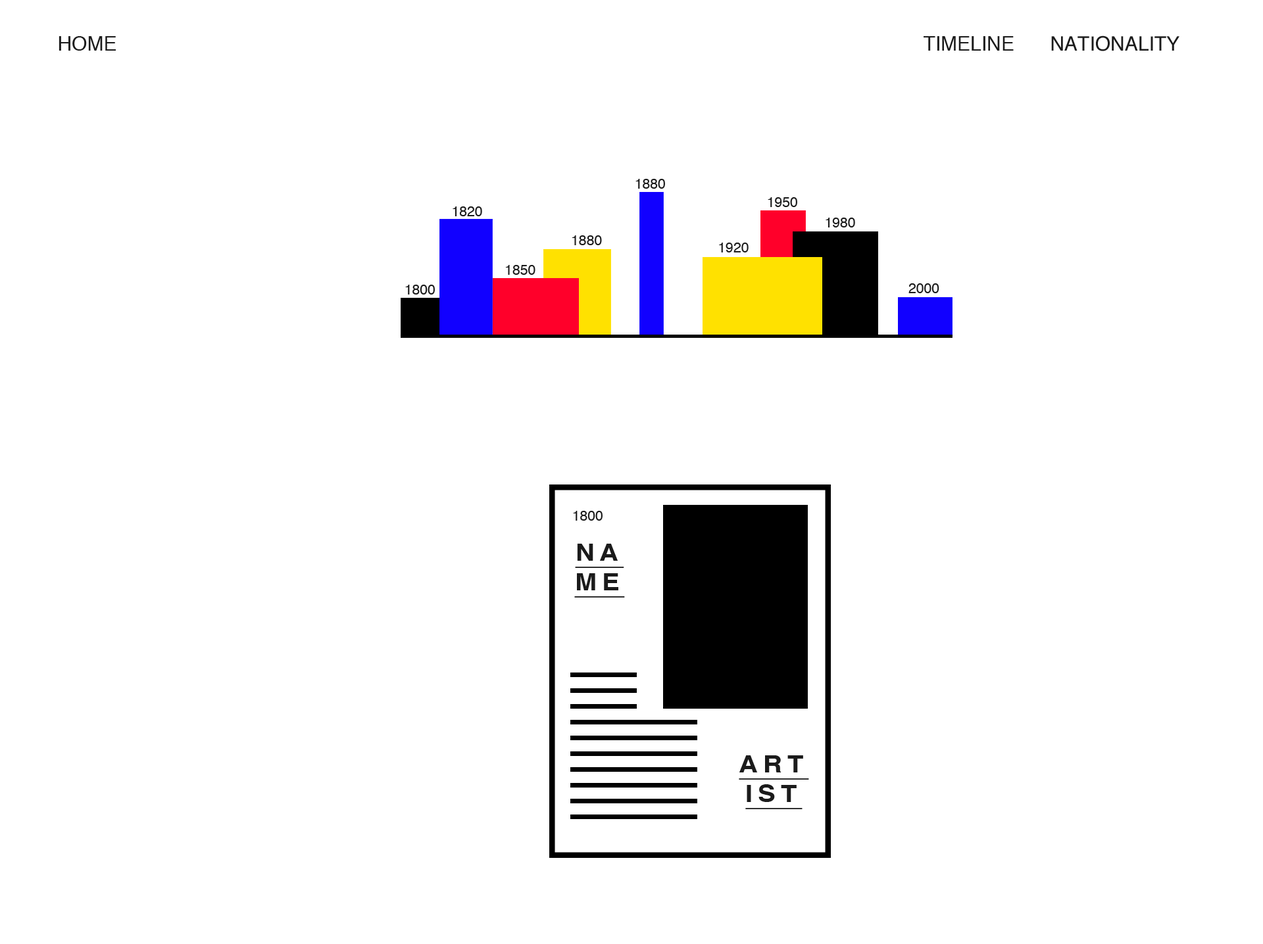
<style>
.page{position:relative;width:1263px;height:944px;background:#ffffff}
.page>*{position:absolute;margin:0}
.t1{font:19.7px "Helvetica";color:#1b1b1b}
.t2{font:13.9px "Helvetica";color:#1b1b1b}
.t3{font:23.7px/29.6px "Helvetica-Bold";letter-spacing:0.2em;color:#1b1b1b;text-decoration:underline;scale:1.11 1}
</style>
<div class="page">
<p class="t1" style="left:59px;top:36px;width:57px;height:15px">HOME</p>
<p class="t1" style="left:923px;top:36px;width:90px;height:15px">TIMELINE</p>
<p class="t1" style="left:1051px;top:36px;width:128px;height:15px">NATIONALITY</p>
<p class="t2" style="left:635px;top:179px;width:30px;height:10px">1880</p>
<p class="t2" style="left:767px;top:197px;width:30px;height:10px">1950</p>
<p class="t2" style="left:452px;top:206px;width:30px;height:10px">1820</p>
<p class="t2" style="left:825px;top:218px;width:30px;height:10px">1980</p>
<p class="t2" style="left:571px;top:235px;width:31px;height:10px">1880</p>
<p class="t2" style="left:719px;top:243px;width:29px;height:10px">1920</p>
<p class="t2" style="left:505px;top:265px;width:30px;height:10px">1850</p>
<p class="t2" style="left:405px;top:285px;width:30px;height:10px">1800</p>
<p class="t2" style="left:908px;top:283px;width:31px;height:10px">2000</p>
<p class="t2" style="left:573px;top:511px;width:29px;height:10px">1800</p>
<p class="t3" style="left:574px;top:544px;width:51px;height:54px;text-align:justify">NA<br>ME</p>
<p class="t3" style="left:739px;top:756px;width:70px;height:54px;text-align:justify">ART<br>IST</p>
</div>
